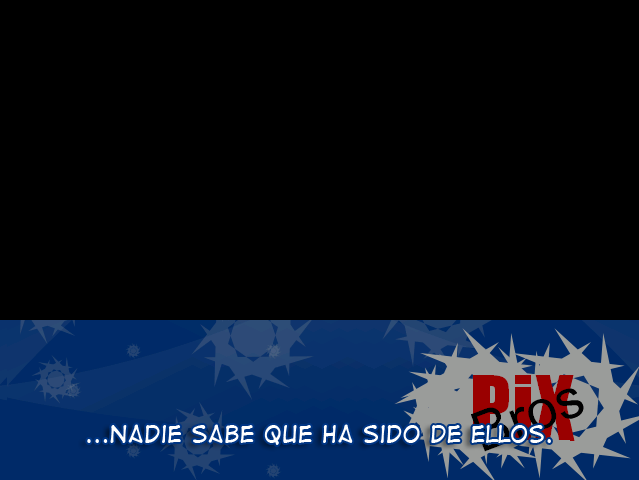
<style>
.page{position:relative;width:639px;height:480px;background:#000000}
.page>*{position:absolute;margin:0}
.t1{font:22.4px "DigitalStrip2";color:#ffffff}
</style>
<div class="page">
<p class="t1" style="left:87px;top:424px;width:464px;height:21px">...nadie sabe que ha sido de ellos.</p>
</div>
